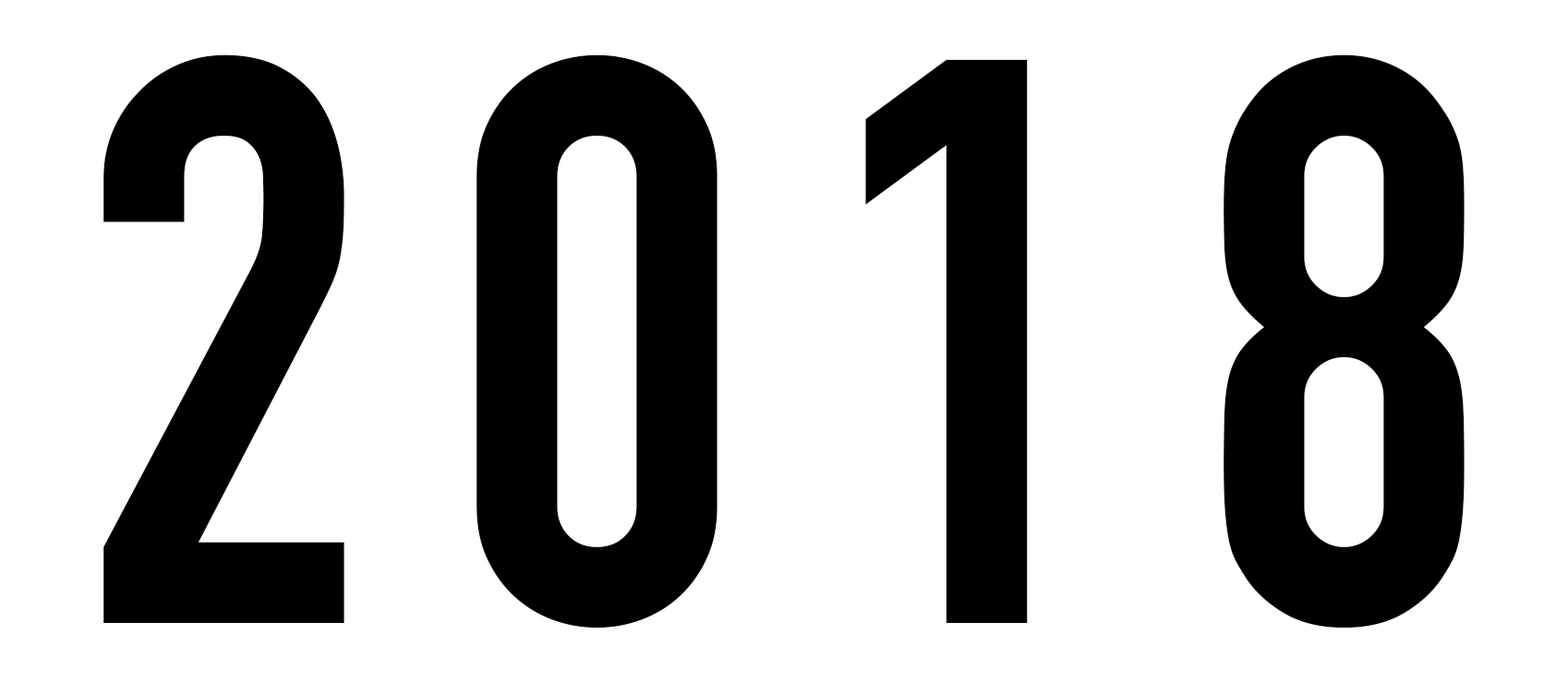
<style>
.page{position:relative;width:1568px;height:682px;background:#ffffff}
.page>*{position:absolute;margin:0}
.t1{font:791px "DINCondensed-Bold";letter-spacing:0.1em;color:#000000}
</style>
<div class="page">
<p class="t1" style="left:103px;top:54px;width:1362px;height:575px">2018</p>
</div>
